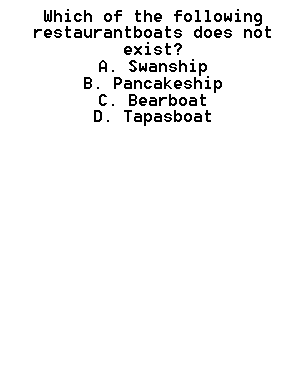
<style>
.page{position:relative;width:305px;height:380px;background:#ffffff}
.page>*{position:absolute;margin:0}
.t1{font:14px "8514oem";color:#000000}
</style>
<div class="page">
<p class="t1" style="left:34px;top:9px;width:237px;height:117px;text-align:center">Which of the following restaurantboats does not exist? <br>A. Swanship <br>B. Pancakeship <br>C. Bearboat <br>D. Tapasboat</p>
</div>
